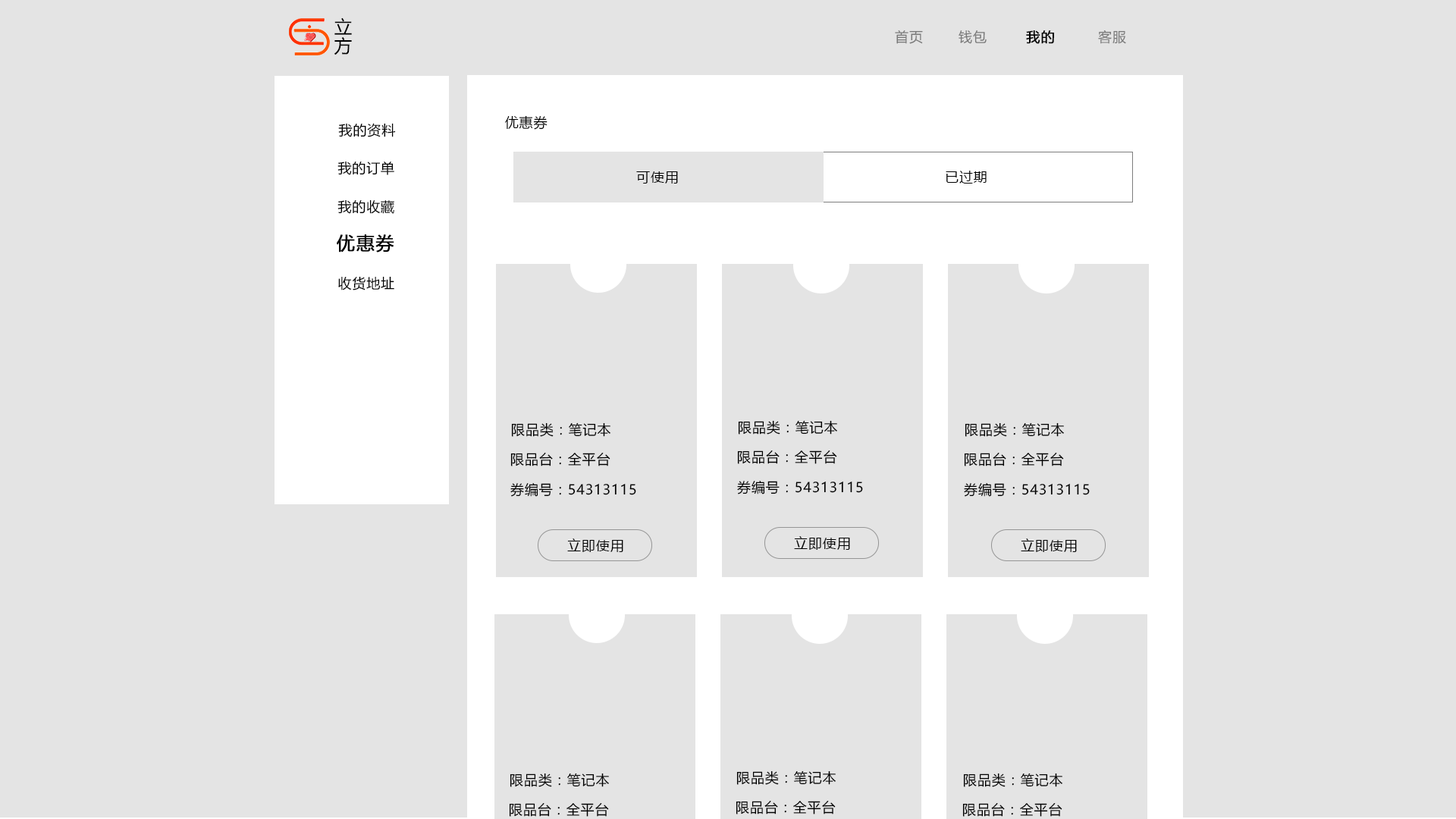
<style>
.page{position:relative;width:1456px;height:819px;background:#e4e4e4}
.page>*{position:absolute;margin:0}
.t1{font:18.2px/13.6px "MicrosoftYaHeiUI";letter-spacing:0.05em;color:#000000}
.t2{font:13.6px "MicrosoftYaHeiUI";letter-spacing:0.05em;color:#797979}
.t3{font:13.6px "MicrosoftYaHeiUI";letter-spacing:0.05em;color:#000000;font-weight:bold}
.t4{font:13.6px "MicrosoftYaHeiUI";letter-spacing:0.05em;color:#000000}
.t5{font:13.7px "MicrosoftYaHeiUI";letter-spacing:0.05em;color:#000000}
.t6{font:18.2px "MicrosoftYaHeiUI";letter-spacing:0.05em;color:#000000;font-weight:bold}
</style>
<div class="page">
<p class="t1" style="left:334px;top:17px;width:18px;height:38px">立方</p>
<p class="t2" style="left:895px;top:30px;width:28px;height:14px">首页</p>
<p class="t2" style="left:959px;top:30px;width:28px;height:14px">钱包</p>
<p class="t3" style="left:1026px;top:30px;width:28px;height:14px">我的</p>
<p class="t2" style="left:1098px;top:30px;width:28px;height:14px">客服</p>
<p class="t4" style="left:338px;top:123px;width:58px;height:14px">我的资料</p>
<p class="t5" style="left:505px;top:115px;width:43px;height:15px">优惠券</p>
<p class="t4" style="left:337px;top:162px;width:57px;height:13px">我的订单</p>
<p class="t5" style="left:636px;top:171px;width:42px;height:13px">可使用</p>
<p class="t5" style="left:946px;top:171px;width:41px;height:13px">已过期</p>
<p class="t4" style="left:337px;top:199px;width:57px;height:15px">我的收藏</p>
<p class="t6" style="left:337px;top:234px;width:57px;height:19px">优惠券</p>
<p class="t4" style="left:338px;top:276px;width:56px;height:14px">收货地址</p>
<p class="t5" style="left:511px;top:422px;width:99px;height:15px">限品类：笔记本</p>
<p class="t5" style="left:738px;top:420px;width:99px;height:15px">限品类：笔记本</p>
<p class="t5" style="left:965px;top:422px;width:99px;height:15px">限品类：笔记本</p>
<p class="t5" style="left:510px;top:453px;width:100px;height:13px">限品台：全平台</p>
<p class="t5" style="left:737px;top:450px;width:100px;height:14px">限品台：全平台</p>
<p class="t5" style="left:964px;top:453px;width:100px;height:13px">限品台：全平台</p>
<p class="t5" style="left:510px;top:483px;width:126px;height:14px">券编号：54313115</p>
<p class="t5" style="left:737px;top:481px;width:126px;height:13px">券编号：54313115</p>
<p class="t5" style="left:964px;top:483px;width:126px;height:14px">券编号：54313115</p>
<p class="t5" style="left:567px;top:538px;width:56px;height:14px">立即使用</p>
<p class="t5" style="left:794px;top:536px;width:56px;height:14px">立即使用</p>
<p class="t5" style="left:1021px;top:538px;width:56px;height:14px">立即使用</p>
<p class="t5" style="left:510px;top:773px;width:99px;height:14px">限品类：笔记本</p>
<p class="t5" style="left:736px;top:770px;width:100px;height:15px">限品类：笔记本</p>
<p class="t5" style="left:963px;top:773px;width:99px;height:14px">限品类：笔记本</p>
<p class="t5" style="left:509px;top:803px;width:100px;height:14px">限品台：全平台</p>
<p class="t5" style="left:736px;top:801px;width:100px;height:13px">限品台：全平台</p>
<p class="t5" style="left:962px;top:803px;width:100px;height:14px">限品台：全平台</p>
</div>
